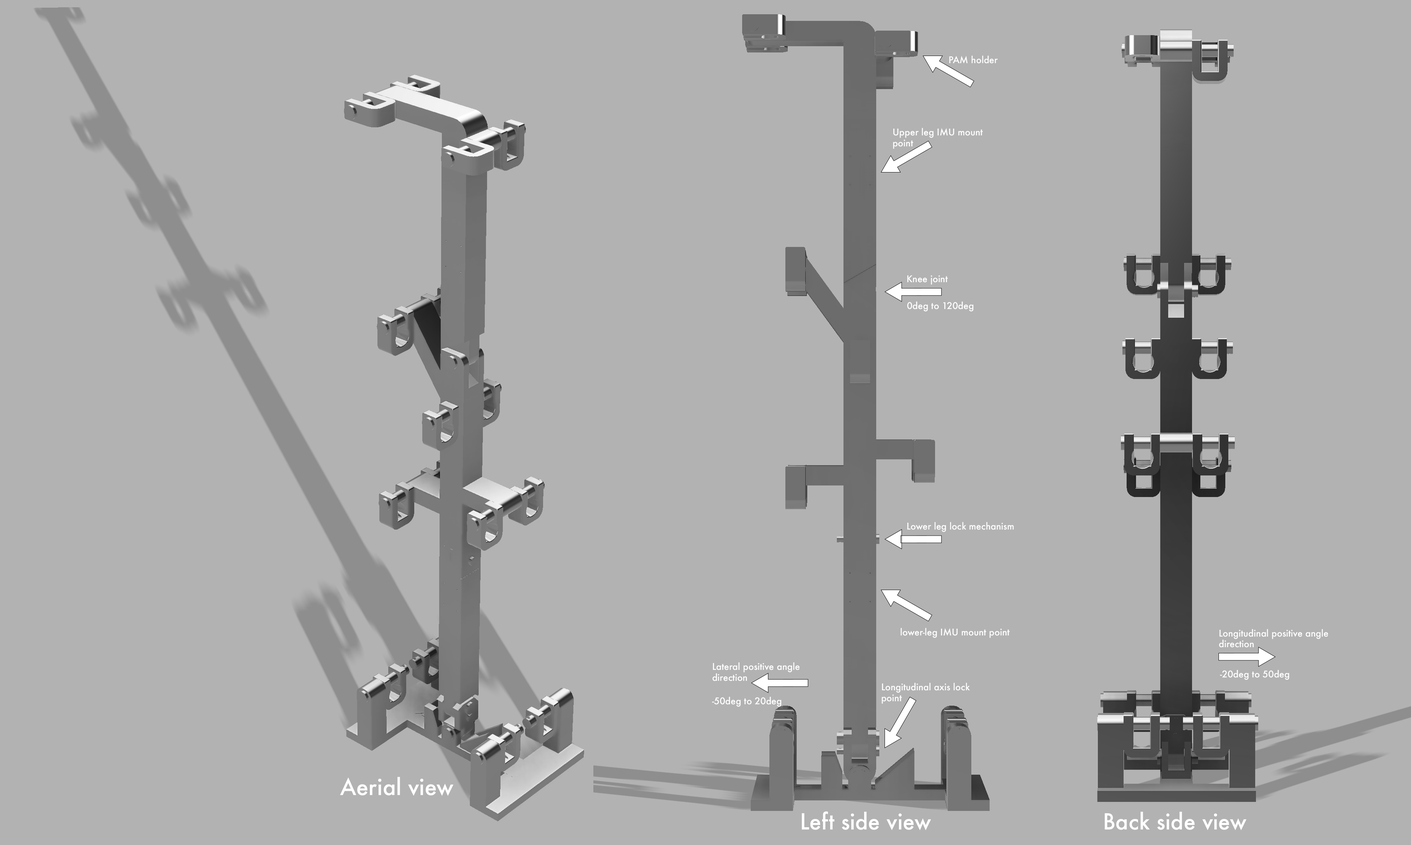
<style>
.page{position:relative;width:1411px;height:845px;background:#b2b2b2}
.page>*{position:absolute;margin:0}
.t1{font:9.1px "Futura-Medium";color:#ffffff}
.t2{font:22.1px "Futura-Medium";color:#ffffff}
.t3{font:21.5px "Futura-Medium";color:#ffffff}
</style>
<div class="page">
<p class="t1" style="left:949px;top:56px;width:49px;height:8px">PAM holder</p>
<p class="t1" style="left:893px;top:128px;width:90px;height:21px">Upper leg IMU mount point</p>
<p class="t1" style="left:907px;top:275px;width:41px;height:10px">Knee joint</p>
<p class="t1" style="left:907px;top:301px;width:67px;height:11px">0deg to 120deg</p>
<p class="t1" style="left:907px;top:522px;width:107px;height:10px">Lower leg lock mechanism</p>
<p class="t1" style="left:901px;top:628px;width:109px;height:10px">lower-leg IMU mount point</p>
<p class="t1" style="left:1219px;top:629px;width:109px;height:19px">Longitudinal positive angle direction</p>
<p class="t1" style="left:713px;top:662px;width:87px;height:19px">Lateral positive angle direction</p>
<p class="t1" style="left:1220px;top:670px;width:69px;height:10px">-20deg to 50deg</p>
<p class="t1" style="left:882px;top:683px;width:88px;height:21px">Longitudinal axis lock point</p>
<p class="t1" style="left:712px;top:697px;width:69px;height:10px">-50deg to 20deg</p>
<p class="t2" style="left:340px;top:777px;width:114px;height:19px">Aerial view</p>
<p class="t3" style="left:802px;top:811px;width:129px;height:19px">Left side view</p>
<p class="t3" style="left:1105px;top:812px;width:142px;height:18px">Back side view</p>
</div>
